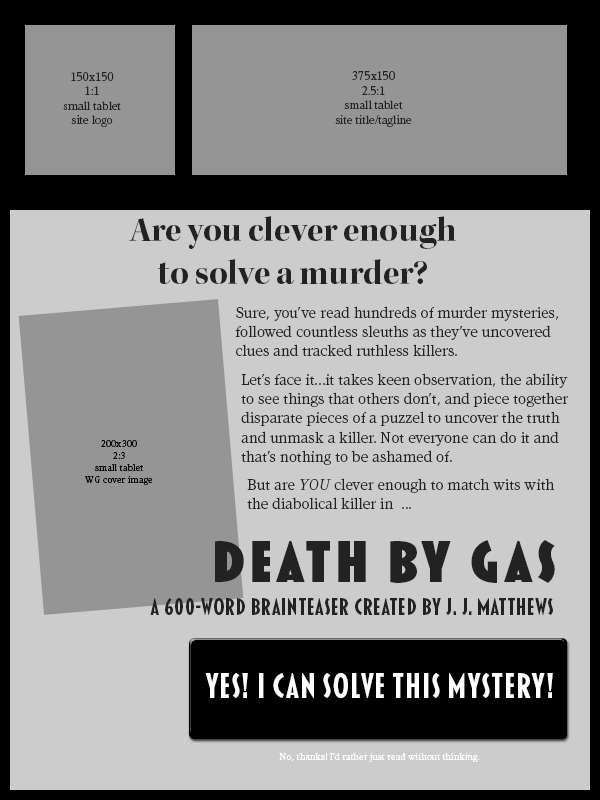
<style>
.page{position:relative;width:600px;height:800px;background:#cccccc}
.page>*{position:absolute;margin:0}
.t1{font:12px "Kandal-Book";color:#222222}
.t2{font:36px "KeplerStd-BoldDisp";color:#222222}
.t3{font:16px "Kandal-Book";color:#222222}
.t4{font:10px "Kandal-Book";color:#000000}
.t5{font:16px "Kandal-BookItalic";color:#222222}
.t6{font:60px "Blakely-Black";letter-spacing:0.075em;color:#222222}
.t7{font:24px "Blakely-Bold";color:#222222}
.t8{font:36px "Blakely-Bold";color:#ffffff}
.t9{font:10px "Kandal-Book";color:#ffffff}
</style>
<div class="page">
<p class="t1" style="left:63px;top:72px;width:58px;height:55px;text-align:center">150x150<br>1:1<br>small tablet<br>site logo</p>
<p class="t1" style="left:335px;top:71px;width:77px;height:56px;text-align:center">375x150<br>2.5:1<br>small tablet<br>site title/tagline</p>
<p class="t2" style="left:129px;top:216px;width:327px;height:68px;text-align:center">Are you clever enough<br>to solve a murder?</p>
<p class="t3" style="left:235px;top:306px;width:324px;height:50px">Sure, you’ve read hundreds of murder mysteries, followed countless sleuths as they’ve uncovered clues and tracked ruthless killers.</p>
<p class="t3" style="left:241px;top:373px;width:327px;height:92px">Let’s face it...it takes keen observation, the ability to see things that others don’t, and piece together disparate pieces of a puzzel to uncover the truth and unmask a killer. Not everyone can do it and that’s nothing to be ashamed of.</p>
<p class="t4" style="left:85px;top:440px;width:68px;height:45px;text-align:center">200x300<br>2:3<br>small tablet<br>WG cover image</p>
<p class="t3" style="left:247px;top:478px;width:308px;height:31px">But are <span class="t5">YOU </span>clever enough to match wits with the diabolical killer in  ...</p>
<p class="t6" style="left:215px;top:540px;width:340px;height:43px">DEATH BY GAS</p>
<p class="t7" style="left:150px;top:598px;width:403px;height:18px">a 600-word brainteaser created by J. J. MATTHEWS</p>
<p class="t8" style="left:205px;top:673px;width:348px;height:25px">YES! I can solve this mystery!</p>
<p class="t9" style="left:279px;top:753px;width:201px;height:9px">No, thanks! I’d rather just read without thinking.</p>
</div>
